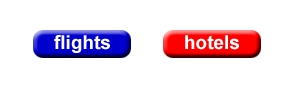
<style>
.page{position:relative;width:304px;height:96px;background:#ffffff}
.page>*{position:absolute;margin:0}
.t1{font:19px "Arial-BoldMT";color:#ffffff}
</style>
<div class="page">
<p class="t1" style="left:54px;top:35px;width:56px;height:18px">flights</p>
<p class="t1" style="left:185px;top:35px;width:54px;height:15px">hotels</p>
</div>
